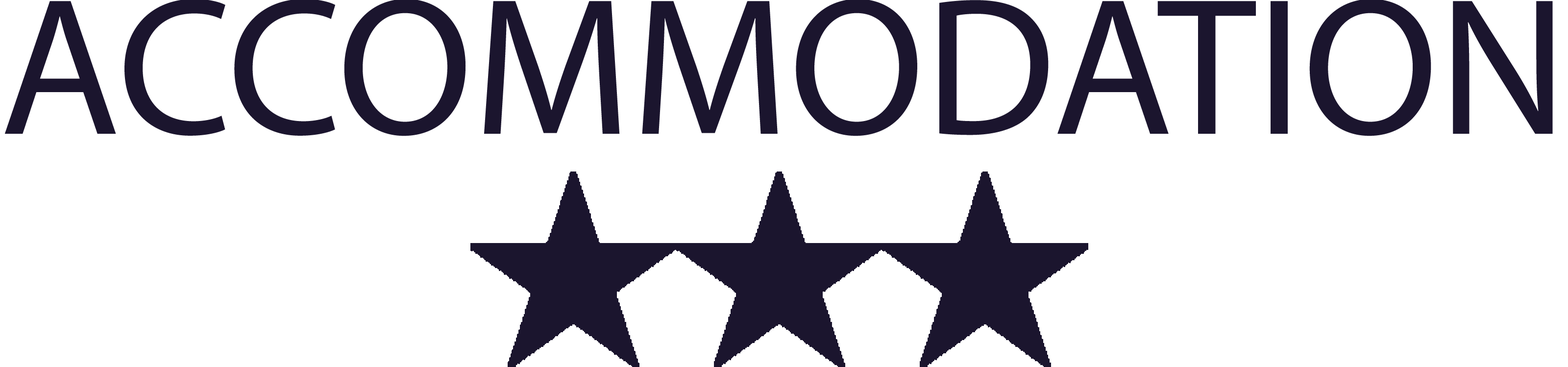
<style>
.page{position:relative;width:1568px;height:367px;background:#ffffff}
.page>*{position:absolute;margin:0}
.t1{font:196.6px "MyriadPro-Regular";color:#1b152e}
</style>
<div class="page">
<p class="t1" style="left:5px;top:0px;width:1548px;height:136px">ACCOMMODATION</p>
</div>
